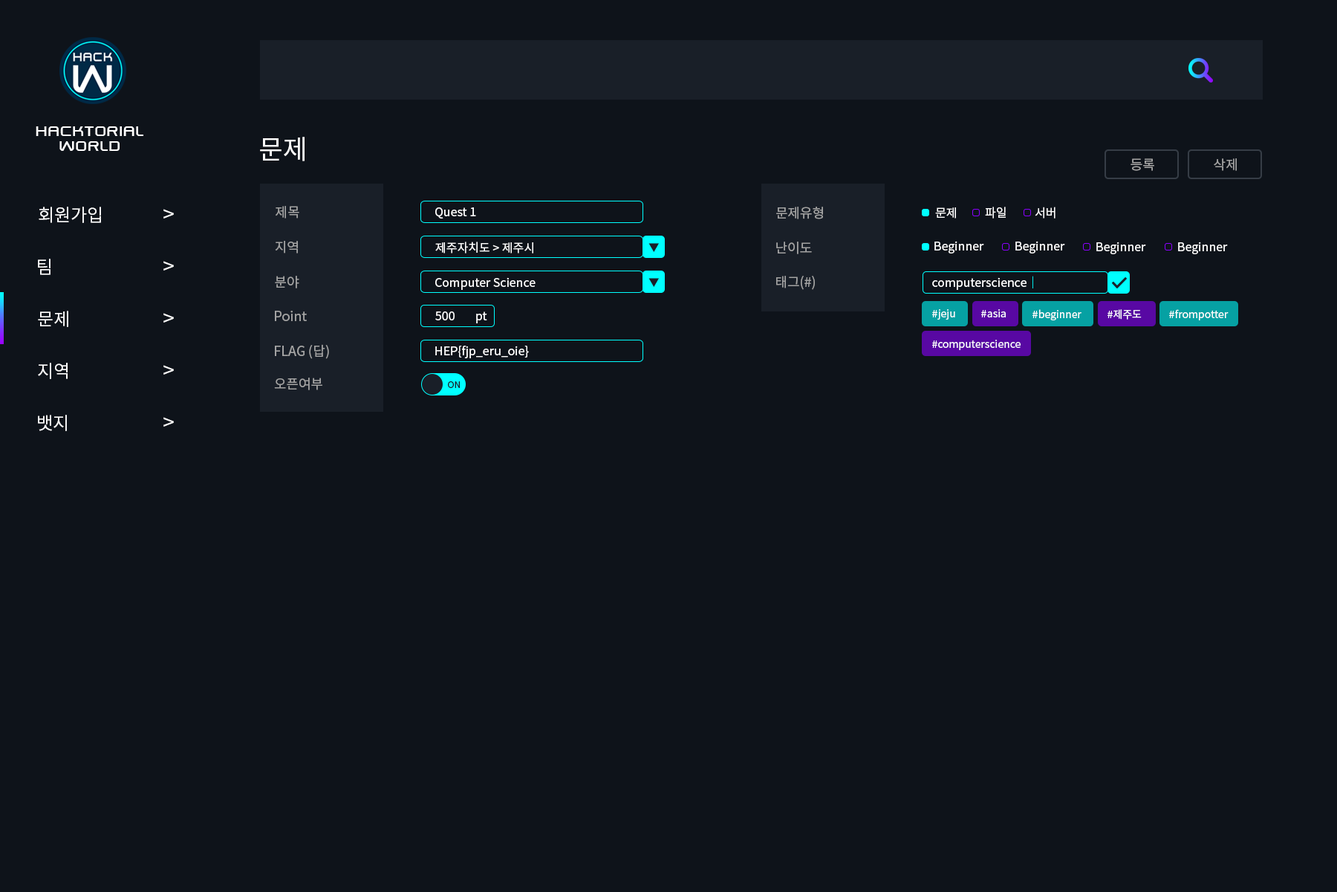
<style>
.page{position:relative;width:1337px;height:892px;background:#0e131a}
.page>*{position:absolute;margin:0}
.t1{font:17.8px/14.9px "SwiszRegular";color:#ffffff}
.t2{font:26.7px "NotoSansCJKkr-Regular";color:#ffffff}
.t3{font:13.4px "NotoSansCJKkr-Regular";color:#a6a6a6}
.t4{font:13.4px "NotoSansCJKkr-Regular";color:#a3a3a3}
.t5{font:17.8px "NotoSansCJKkr-Regular";color:#ffffff}
.t6{font:20.8px "NotoSansCJKkr-Regular";color:#ffffff}
.t7{font:11.9px "NotoSansCJKkr-Regular";color:#ffffff}
.t8{font:10.4px "NotoSansCJKkr-Regular";color:#191f28}
.t9{font:11.9px "NotoSansCJKkr-Regular";color:#00ffff}
.t10{font:10.4px "NotoSansCJKkr-Regular";color:#ffffff}
.t11{font:8.9px "NotoSansCJKkr-Regular";color:#191f28}
</style>
<div class="page">
<p class="t1" style="left:36px;top:126px;width:107px;height:25px;text-align:center">hacktorial<br>world</p>
<p class="t2" style="left:260px;top:137px;width:45px;height:24px">문제</p>
<p class="t3" style="left:1131px;top:158px;width:24px;height:13px">등록</p>
<p class="t4" style="left:1214px;top:158px;width:23px;height:13px">삭제</p>
<p class="t5" style="left:39px;top:207px;width:62px;height:16px">회원가입</p>
<p class="t6" style="left:163px;top:209px;width:11px;height:9px">&gt;</p>
<p class="t4" style="left:276px;top:206px;width:23px;height:12px">제목</p>
<p class="t7" style="left:435px;top:207px;width:41px;height:11px">Quest 1</p>
<p class="t4" style="left:776px;top:207px;width:47px;height:12px">문제유형</p>
<p class="t7" style="left:935px;top:207px;width:21px;height:11px">문제</p>
<p class="t7" style="left:985px;top:207px;width:21px;height:11px">파일</p>
<p class="t7" style="left:1035px;top:207px;width:21px;height:11px">서버</p>
<p class="t4" style="left:275px;top:241px;width:23px;height:12px">지역</p>
<p class="t7" style="left:435px;top:241px;width:98px;height:12px">제주자치도 &gt; 제주시</p>
<p class="t8" style="left:649px;top:243px;width:10px;height:9px">▼</p>
<p class="t4" style="left:776px;top:241px;width:36px;height:13px">난이도</p>
<p class="t7" style="left:935px;top:241px;width:49px;height:12px">Beginner</p>
<p class="t7" style="left:1016px;top:241px;width:49px;height:12px">Beginner</p>
<p class="t7" style="left:1097px;top:241px;width:49px;height:13px">Beginner</p>
<p class="t7" style="left:1178px;top:241px;width:50px;height:13px">Beginner</p>
<p class="t5" style="left:38px;top:259px;width:13px;height:16px">팀</p>
<p class="t6" style="left:163px;top:261px;width:11px;height:9px">&gt;</p>
<p class="t4" style="left:275px;top:276px;width:24px;height:12px">분야</p>
<p class="t7" style="left:435px;top:277px;width:101px;height:13px">Computer Science</p>
<p class="t8" style="left:649px;top:278px;width:10px;height:9px">▼</p>
<p class="t4" style="left:776px;top:276px;width:39px;height:14px">태그(#)</p>
<p class="t7" style="left:932px;top:276px;width:102px;height:14px">computerscience<span class="t9">｜</span></p>
<p class="t5" style="left:38px;top:311px;width:30px;height:16px">문제</p>
<p class="t6" style="left:163px;top:313px;width:11px;height:9px">&gt;</p>
<p class="t4" style="left:275px;top:311px;width:32px;height:10px">Point</p>
<p class="t7" style="left:435px;top:311px;width:20px;height:9px">500</p>
<p class="t7" style="left:476px;top:311px;width:11px;height:12px">pt</p>
<p class="t10" style="left:932px;top:309px;width:24px;height:10px">#jeju</p>
<p class="t10" style="left:982px;top:309px;width:24px;height:8px">#asia</p>
<p class="t10" style="left:1033px;top:309px;width:49px;height:11px">#beginner</p>
<p class="t10" style="left:1108px;top:309px;width:34px;height:10px">#제주도</p>
<p class="t10" style="left:1169px;top:309px;width:60px;height:11px">#frompotter</p>
<p class="t10" style="left:932px;top:340px;width:89px;height:10px">#computerscience</p>
<p class="t4" style="left:275px;top:344px;width:54px;height:15px">FLAG (답)</p>
<p class="t7" style="left:435px;top:345px;width:94px;height:13px">HEP{fjp_eru_oie}</p>
<p class="t5" style="left:38px;top:363px;width:30px;height:16px">지역</p>
<p class="t6" style="left:163px;top:365px;width:11px;height:9px">&gt;</p>
<p class="t4" style="left:274px;top:377px;width:48px;height:13px">오픈여부</p>
<p class="t11" style="left:448px;top:381px;width:12px;height:7px">ON</p>
<p class="t5" style="left:38px;top:415px;width:29px;height:16px">뱃지</p>
<p class="t6" style="left:163px;top:417px;width:11px;height:9px">&gt;</p>
</div>
